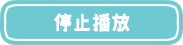
<style>
.page{position:relative;width:183px;height:45px;background:#6ecad0}
.page>*{position:absolute;margin:0}
.t1{font:12px "shetumodengxiaofangti";color:#ffffff;font-weight:bold;scale:0.94 1}
</style>
<div class="page">
<p class="t1" style="left:54px;top:13px;width:76px;height:19px">停止播放</p>
</div>
